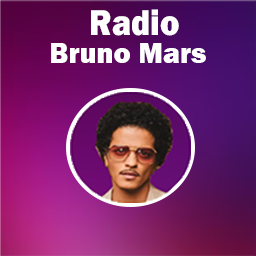
<style>
.page{position:relative;width:256px;height:256px}
.page>*{position:absolute;margin:0}
.t1{font:37.2px "FranklinGothic-Heavy";color:#ffffff;scale:0.88 1}
.t2{font:46.5px "FranklinGothic-Heavy";color:#ffffff;scale:0.88 1}
.t3{font:29.2px "FranklinGothic-Heavy";color:#ffffff}
</style>
<div class="page">
<p class="t1" style="left:91px;top:9px;width:88px;height:27px"><span class="t2">          </span>Radio</p>
<p class="t3" style="left:51px;top:43px;width:155px;height:20px">Bruno Mars</p>
</div>
